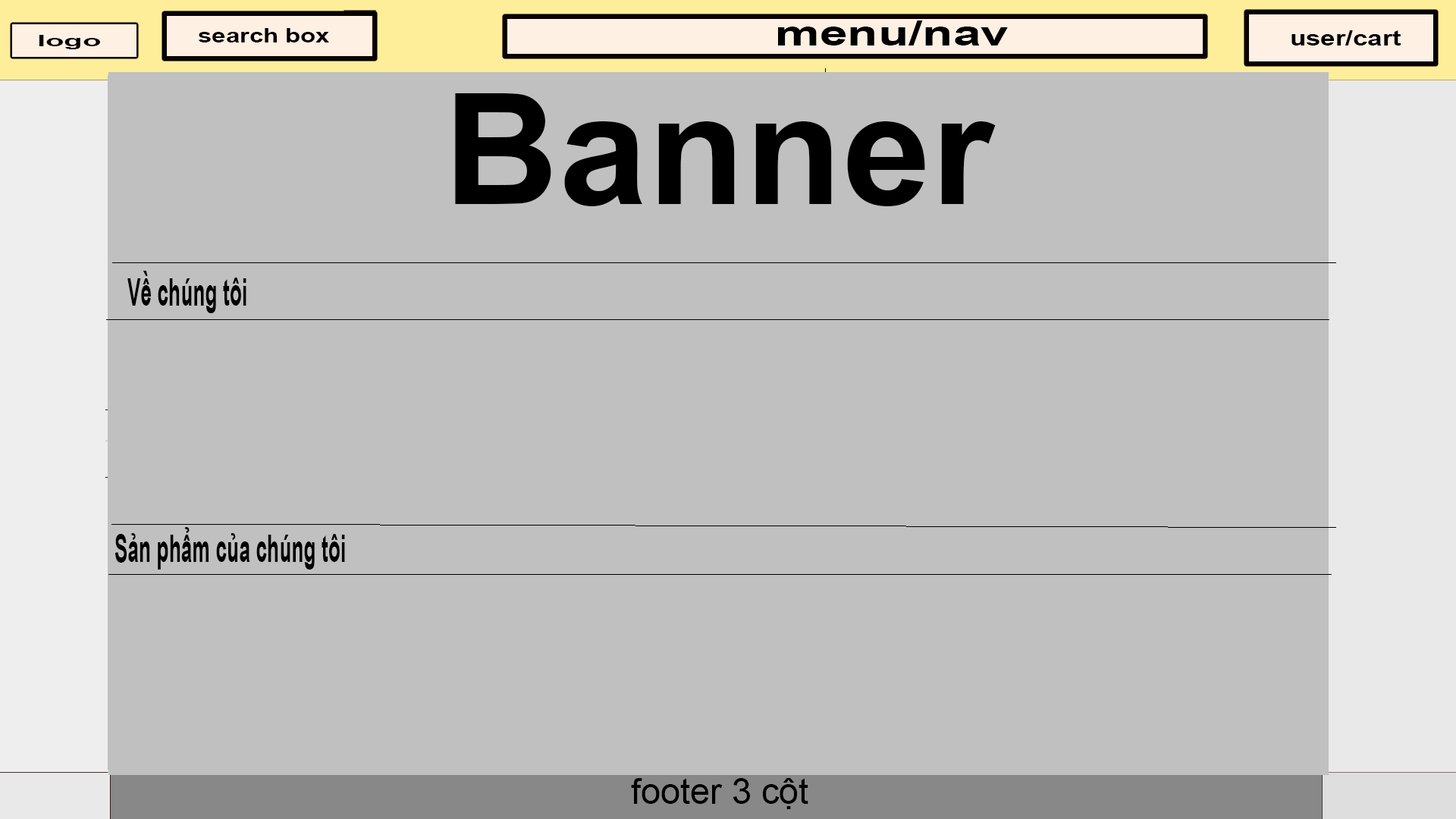
<style>
.page{position:relative;width:1456px;height:819px;background:#c0c0c0}
.page>*{position:absolute;margin:0}
.t1{font:19.7px "Arial-BoldMT";color:#000000;scale:1.27 1}
.t2{font:35px "Arial-BoldMT";color:#000000;scale:1.43 1}
.t3{font:15.1px "Arial-BoldMT";color:#000000;scale:2.02 1}
.t4{font:21.2px "Arial-BoldMT";color:#000000;scale:1.25 1}
.t5{font:154.8px "Arial-BoldMT";color:#000000;scale:1.03 1}
.t6{font:37.7px "Arial-BoldMT";color:#000000;scale:0.53 1}
.t7{font:35.6px "ArialMT";color:#000000}
</style>
<div class="page">
<p class="t1" style="left:198px;top:28px;width:131px;height:14px">search box</p>
<p class="t2" style="left:778px;top:20px;width:230px;height:25px">menu/nav</p>
<p class="t3" style="left:39px;top:35px;width:61px;height:14px">logo</p>
<p class="t4" style="left:1291px;top:30px;width:110px;height:15px">user/cart</p>
<p class="t5" style="left:455px;top:93px;width:541px;height:113px">Banner</p>
<p class="t6" style="left:127px;top:271px;width:119px;height:42px">Về chúng tôi</p>
<p class="t6" style="left:115px;top:527px;width:230px;height:43px">Sản phẩm của chúng tôi</p>
<p class="t7" style="left:631px;top:778px;width:177px;height:31px">footer 3 cột</p>
</div>
